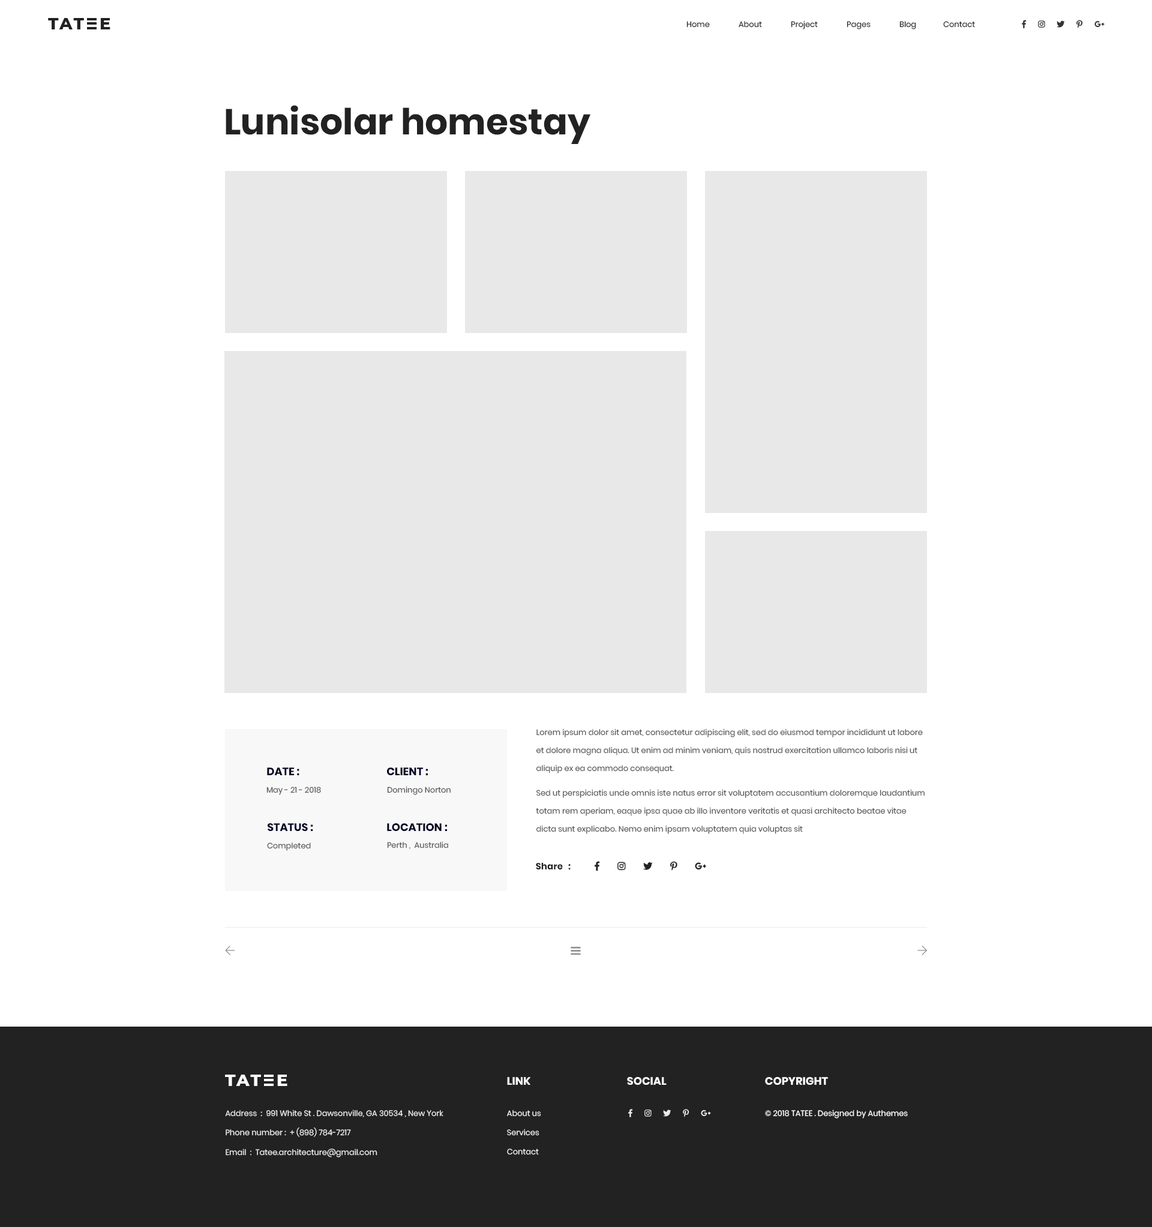
<style>
.page{position:relative;width:1152px;height:1227px;background:#ffffff}
.page>*{position:absolute;margin:0}
.t1{font:16.5px "Montserrat-ExtraBold";letter-spacing:0.1em;color:#222222;text-transform:uppercase}
.t2{font:7.8px "Poppins-Regular";color:#222222}
.t3{font:36px "Poppins-Bold";color:#222222}
.t4{font:7.8px/18px "Poppins-Regular";color:#555555}
.t5{font:10.8px "Poppins-Bold";color:#000022;text-transform:uppercase}
.t6{font:7.8px "Poppins-Regular";color:#555555}
.t7{font:9px "Poppins-Bold";color:#222222}
.t8{font:16.5px "Montserrat-ExtraBold";letter-spacing:0.1em;color:#ffffff;text-transform:uppercase}
.t9{font:10.8px "Poppins-Bold";color:#ffffff;text-transform:uppercase}
.t10{font:7.8px "Poppins-Regular";color:#ebebeb}
.t11{font:7.8px/19.2px "Poppins-Regular";color:#ebebeb}
.t12{font:7.8px "Poppins-Regular";color:#ffffff}
</style>
<div class="page">
<p class="t1" style="left:48px;top:18px;width:36px;height:11px">tat</p>
<p class="t1" style="left:100px;top:18px;width:10px;height:11px">e</p>
<p class="t2" style="left:686px;top:20px;width:289px;height:9px">Home               About               Project               Pages               Blog              Contact</p>
<p class="t3" style="left:226px;top:105px;width:364px;height:39px">Lunisolar homestay</p>
<p class="t4" style="left:536px;top:728px;width:387px;height:45px">Lorem ipsum dolor sit amet, consectetur adipiscing elit, sed do eiusmod tempor incididunt ut labore et dolore magna aliqua. Ut enim ad minim veniam, quis nostrud exercitation ullamco laboris nisi ut aliquip ex ea commodo consequat.</p>
<p class="t5" style="left:267px;top:767px;width:32px;height:8px">date :</p>
<p class="t5" style="left:387px;top:767px;width:41px;height:8px">Client :</p>
<p class="t6" style="left:266px;top:787px;width:55px;height:8px">May - 21 - 2018</p>
<p class="t6" style="left:387px;top:786px;width:64px;height:9px">Domingo Norton</p>
<p class="t4" style="left:536px;top:789px;width:389px;height:45px">Sed ut perspiciatis unde omnis iste natus error sit voluptatem accusantium doloremque laudantium totam rem aperiam, eaque ipsa quae ab illo inventore veritatis et quasi architecto beatae vitae dicta sunt explicabo. Nemo enim ipsam voluptatem quia voluptas sit</p>
<p class="t5" style="left:268px;top:823px;width:45px;height:8px">status :</p>
<p class="t5" style="left:387px;top:823px;width:60px;height:8px">location :</p>
<p class="t6" style="left:267px;top:842px;width:44px;height:9px">Completed</p>
<p class="t6" style="left:387px;top:841px;width:61px;height:8px">Perth ,  Australia</p>
<p class="t7" style="left:536px;top:863px;width:35px;height:6px">Share   :</p>
<p class="t8" style="left:225px;top:1075px;width:36px;height:11px">tat</p>
<p class="t8" style="left:277px;top:1075px;width:10px;height:11px">e</p>
<p class="t9" style="left:507px;top:1077px;width:23px;height:8px">Link</p>
<p class="t9" style="left:627px;top:1077px;width:40px;height:8px">Social</p>
<p class="t9" style="left:765px;top:1077px;width:63px;height:8px">copyright</p>
<p class="t10" style="left:225px;top:1109px;width:218px;height:8px">Address  :  991 White St . Dawsonville, GA 30534 , New York</p>
<p class="t11" style="left:507px;top:1110px;width:34px;height:45px">About us<br>Services<br>Contact</p>
<p class="t12" style="left:765px;top:1109px;width:143px;height:9px">© 2018 TATEE . Designed by Authemes</p>
<p class="t10" style="left:226px;top:1127px;width:125px;height:10px">Phone number :  + (898) 784-7217</p>
<p class="t10" style="left:226px;top:1148px;width:151px;height:9px">Email  :  Tatee.architecture@gmail.com</p>
</div>
